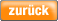
<style>
.page{position:relative;width:58px;height:21px}
.page>*{position:absolute;margin:0}
.t1{font:14px "Helvetica87-CondensedHeavy";color:#ffffff}
</style>
<div class="page">
<p class="t1" style="left:9px;top:4px;width:40px;height:12px">zurück</p>
</div>
